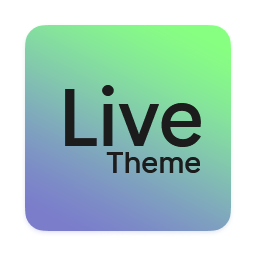
<style>
.page{position:relative;width:256px;height:256px;background:#ffffff}
.page>*{position:absolute;margin:0}
.t1{font:80px "AbletonSansSmall-Regular";letter-spacing:-0.03em;color:#1c1c1c}
.t2{font:30px "AbletonSansSmall-Regular";letter-spacing:-0.025em;color:#1c1c1c}
</style>
<div class="page">
<p class="t1" style="left:65px;top:85px;width:136px;height:62px">Live</p>
<p class="t2" style="left:106px;top:152px;width:94px;height:21px">Theme</p>
</div>
